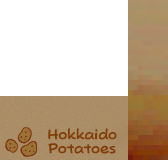
<style>
.page{position:relative;width:168px;height:160px;background:#ffffff}
.page>*{position:absolute;margin:0}
.t1{font:14px/14px "PopJoyStd-B";color:#813b03;scale:0.95 1}
</style>
<div class="page">
<p class="t1" style="left:48px;top:128px;width:69px;height:26px;text-align:center">Hokkaido<br>Potatoes</p>
</div>
